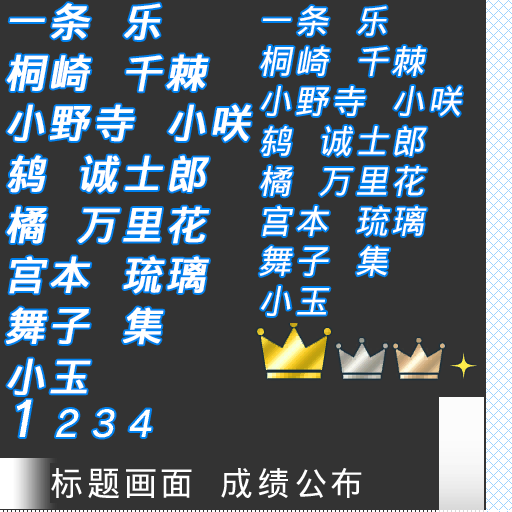
<style>
.page{position:relative;width:512px;height:512px;background:#333333}
.page>*{position:absolute;margin:0}
.t1{font:40px/50.7px "WenQuanYiMicroHeiMono";letter-spacing:0.075em;color:#ffffff;font-weight:bold;font-style:italic}
.t2{font:33.3px/40px "WenQuanYiMicroHeiMono";letter-spacing:0.1em;color:#ffffff;font-style:italic}
.t3{font:33.3px "WenQuanYiMicroHeiMono";letter-spacing:0.1em;color:#ffffff}
</style>
<div class="page">
<p class="t1" style="left:6px;top:3px;width:246px;height:392px">一条 乐<br>桐崎 千棘<br>小野寺 小咲<br>鸫 诚士郎<br>橘 万里花<br>宫本 琉璃<br>舞子 集<br>小玉</p>
<p class="t2" style="left:259px;top:6px;width:203px;height:310px">一条 乐<br>桐崎 千棘<br>小野寺 小咲<br>鸫 诚士郎<br>橘 万里花<br>宫本 琉璃<br>舞子 集<br>小玉</p>
<p class="t3" style="left:51px;top:468px;width:311px;height:31px">标题画面 成绩公布</p>
</div>
